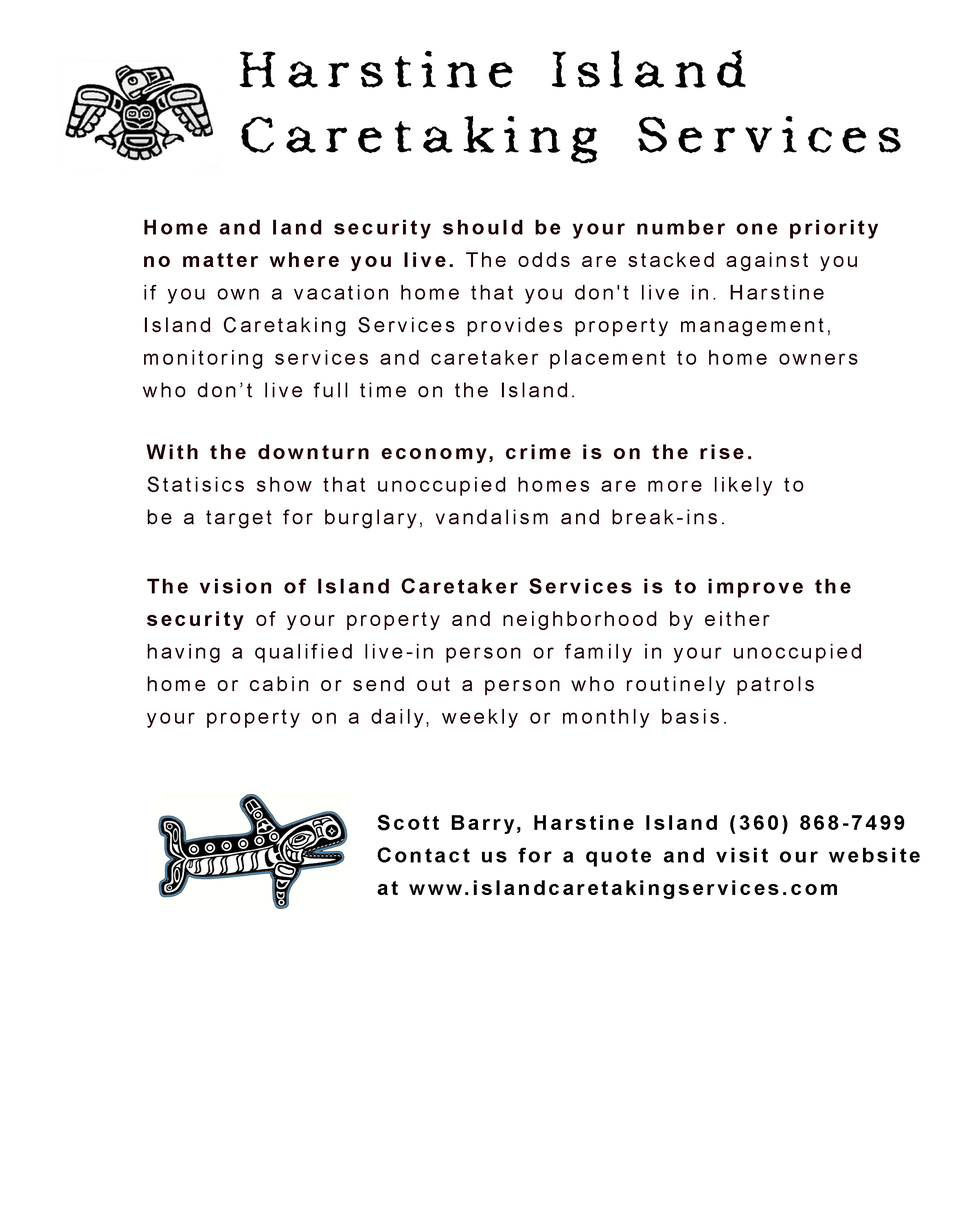
<style>
.page{position:relative;width:977px;height:1221px;background:#ffffff}
.page>*{position:absolute;margin:0}
.t1{font:50.7px/32.6px "Addicted-toType";letter-spacing:0.14em;color:#020003}
.t2{font:20.3px/32.6px "ArialMT";letter-spacing:0.14em;color:#1f0004}
.t3{font:20.3px/32.6px "Arial-BoldMT";letter-spacing:0.14em;color:#1f0004}
.t4{font:20.3px/32.6px "Arial-BoldMT";letter-spacing:0.14em;color:#010003}
</style>
<div class="page">
<p class="t1" style="left:240px;top:50px;width:660px;height:113px">Harstine Island<br> <br>Caretaking Services</p>
<p class="t2" style="left:143px;top:220px;width:735px;height:177px"><span class="t3">Home and land security should be your number one priority <br>no matter where you live.</span> The odds are stacked against you <br>if you own a vacation home that you don't live in. Harstine <br>Island Caretaking Services provides property management, <br>monitoring services and caretaker placement to home owners <br>who don’t live full time on the Island.</p>
<p class="t2" style="left:147px;top:444px;width:656px;height:84px"><span class="t3">With the downturn economy, crime is on the rise.<br></span>Statisics show that unoccupied homes are more likely to <br>be a target for burglary, vandalism and break-ins.</p>
<p class="t2" style="left:147px;top:578px;width:714px;height:150px"><span class="t3">The vision of Island Caretaker Services is to improve the <br>security</span> of your property and neighborhood by either <br>having a qualified live-in person or family in your unoccupied <br>home or cabin or send out a person who routinely patrols <br>your property on a daily, weekly or monthly basis.</p>
<p class="t4" style="left:378px;top:815px;width:541px;height:84px">Scott Barry, Harstine Island (360) 868-7499<br>Contact us for a quote and visit our website<br>at www.islandcaretakingservices.com</p>
</div>
